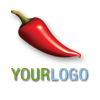
<style>
.page{position:relative;width:100px;height:100px;background:#ffffff}
.page>*{position:absolute;margin:0}
.t1{font:18px "Helvetica-Condensed-Thin";color:#6da61b}
.t2{font:18px "Helvetica-Condensed-Thin";color:#8dc3f2}
</style>
<div class="page">
<p class="t1" style="left:11px;top:68px;width:77px;height:13px">YOUR<span class="t2">LOGO</span></p>
</div>
